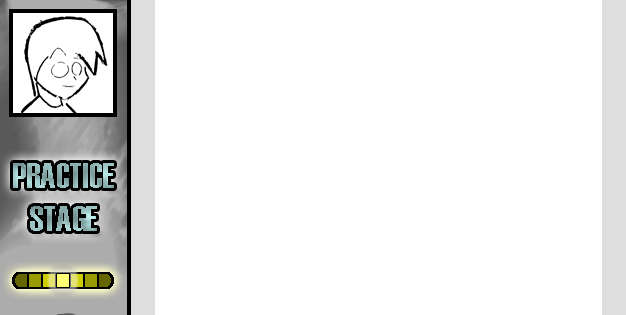
<style>
.page{position:relative;width:626px;height:315px;background:#ffffff}
.page>*{position:absolute;margin:0}
.t1{font:36px "Haettenschweiler"}
</style>
<div class="page">
<p class="t1" style="left:13px;top:163px;width:101px;height:68px;text-align:center">PRACTICE<br>STAGE</p>
</div>
